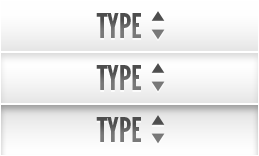
<style>
.page{position:relative;width:259px;height:156px}
.page>*{position:absolute;margin:0}
.t1{font:34.2px "LeagueGothic";text-transform:uppercase}
</style>
<div class="page">
<p class="t1" style="left:96px;top:13px;width:45px;height:25px">TYPE</p>
<p class="t1" style="left:96px;top:65px;width:45px;height:25px">TYPE</p>
<p class="t1" style="left:96px;top:117px;width:45px;height:25px">TYPE</p>
</div>
